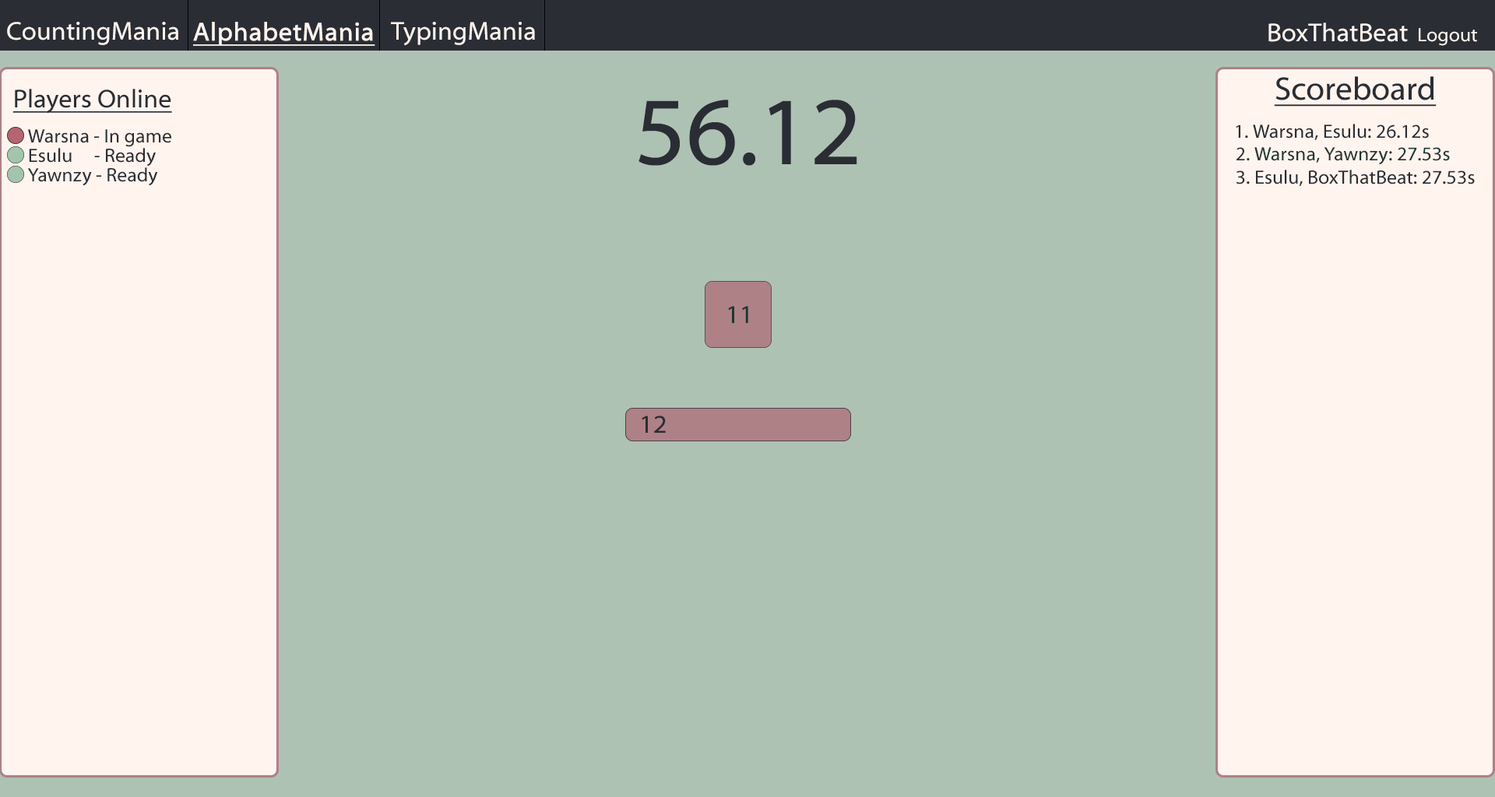
<style>
.page{position:relative;width:1495px;height:797px;background:#aec2b4}
.page>*{position:absolute;margin:0}
.t1{font:26px "MyriadWebPro";color:#fff4ee}
.t2{font:26px "MyriadWebPro";color:#fff4ee;font-weight:bold;text-decoration:underline}
.t3{font:19.5px "MyriadWebPro";color:#fff4ee}
.t4{font:32.4px "MyriadWebPro";color:#2a2d34;text-decoration:underline}
.t5{font:26px "MyriadWebPro";color:#2a2d34;text-decoration:underline}
.t6{font:97.3px "MyriadWebPro";color:#2a2d34}
.t7{font:19.5px "MyriadWebPro";color:#2a2d34}
.t8{font:19.5px "MyriadWebPro";color:#203631}
.t9{font:26px "MyriadWebPro";color:#203631}
.t10{font:26px "MyriadWebPro";color:#2a2d34}
</style>
<div class="page">
<p class="t1" style="left:7px;top:22px;width:171px;height:23px">CountingMania</p>
<p class="t2" style="left:193px;top:22px;width:182px;height:24px">AlphabetMania</p>
<p class="t1" style="left:391px;top:22px;width:144px;height:24px">TypingMania</p>
<p class="t1" style="left:1269px;top:23px;width:139px;height:19px">BoxThatBeat</p>
<p class="t3" style="left:1419px;top:28px;width:58px;height:18px">Logout</p>
<p class="t4" style="left:1274px;top:76px;width:163px;height:31px">Scoreboard</p>
<p class="t5" style="left:12px;top:89px;width:160px;height:25px">Players Online</p>
<p class="t6" style="left:639px;top:100px;width:218px;height:66px">56.12</p>
<p class="t7" style="left:1236px;top:124px;width:193px;height:16px">1. Warsna, Esulu: 26.12s</p>
<p class="t7" style="left:28px;top:129px;width:143px;height:18px">Warsna - In game</p>
<p class="t7" style="left:29px;top:148px;width:127px;height:19px">Esulu     - Ready</p>
<p class="t8" style="left:1237px;top:147px;width:213px;height:18px">2. Warsna, Yawnzy: 27.53s</p>
<p class="t7" style="left:27px;top:167px;width:131px;height:19px">Yawnzy - Ready</p>
<p class="t7" style="left:1236px;top:170px;width:239px;height:16px">3. Esulu, BoxThatBeat: 27.53s</p>
<p class="t9" style="left:728px;top:306px;width:20px;height:17px">11</p>
<p class="t10" style="left:642px;top:416px;width:24px;height:17px">12</p>
</div>
